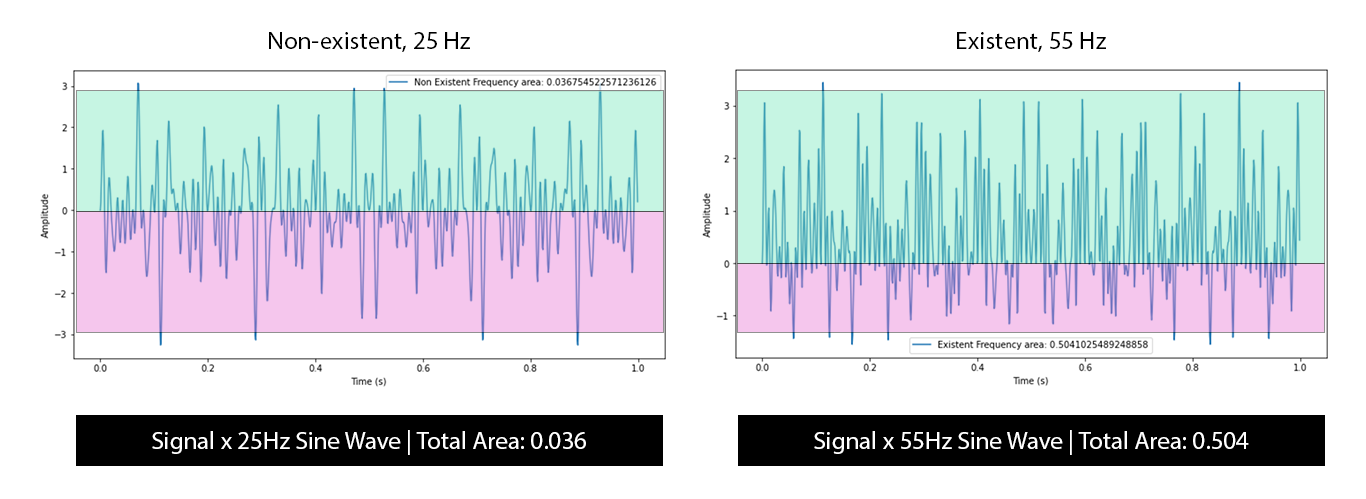
<style>
.page{position:relative;width:1366px;height:499px;background:#ffffff}
.page>*{position:absolute;margin:0}
.t1{font:25px "MyriadPro-Regular";color:#000000}
.t2{font:25px "MyriadPro-Regular";color:#ffffff}
</style>
<div class="page">
<p class="t1" style="left:269px;top:32px;width:201px;height:20px">Non-existent, 25 Hz</p>
<p class="t1" style="left:957px;top:32px;width:149px;height:20px">Existent, 55 Hz</p>
<p class="t2" style="left:152px;top:430px;width:434px;height:25px">Signal x 25Hz Sine Wave | Total Area: 0.036</p>
<p class="t2" style="left:814px;top:430px;width:435px;height:25px">Signal x 55Hz Sine Wave | Total Area: 0.504</p>
</div>
